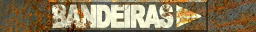
<style>
.page{position:relative;width:256px;height:32px}
.page>*{position:absolute;margin:0}
.t1{font:30.7px "Arial-Black";letter-spacing:-0.1em;color:#ffffde;text-transform:uppercase;font-weight:bold;scale:0.67 1}
</style>
<div class="page">
<p class="t1" style="left:52px;top:4px;width:122px;height:24px">bandeiras</p>
</div>
